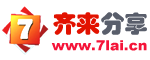
<style>
.page{position:relative;width:150px;height:60px;background:#ffffff}
.page>*{position:absolute;margin:0}
.t1{font:24px "STHupo";color:#e21200}
.t2{font:24px "STHupo";color:#595e6b}
.t3{font:14px "Arial-Black";color:#f51439}
</style>
<div class="page">
<p class="t1" style="left:53px;top:12px;width:94px;height:23px">齐来<span class="t2">分享</span></p>
<p class="t3" style="left:51px;top:40px;width:96px;height:11px">www.7lai.cn</p>
</div>
